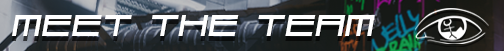
<style>
.page{position:relative;width:504px;height:51px}
.page>*{position:absolute;margin:0}
.t1{font:31px "FerriteCoreDX-Medium";letter-spacing:0.06em;color:#ffffff;font-style:italic}
</style>
<div class="page">
<p class="t1" style="left:12px;top:15px;width:363px;height:21px">MEET THE TEAM</p>
</div>
